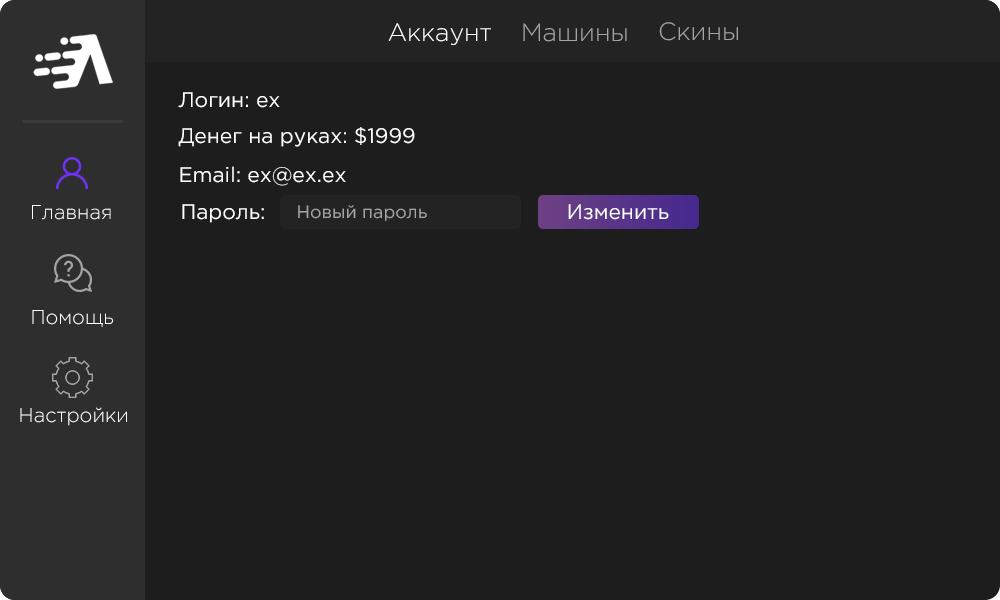
<style>
.page{position:relative;width:1000px;height:600px;background:#1d1d1d}
.page>*{position:absolute;margin:0}
.t1{font:25px "GothamPro-Light";color:#ffffff}
.t2{font:25px "GothamPro-Light";color:#a4a4a4}
.t3{font:21px "GothamPro";color:#ffffff}
.t4{font:20px "GothamPro-Light";color:#ffffff}
.t5{font:17.8px "GothamPro";color:#a4a4a4}
</style>
<div class="page">
<p class="t1" style="left:388px;top:23px;width:103px;height:22px">Аккаунт</p>
<p class="t2" style="left:523px;top:23px;width:104px;height:19px">Машины</p>
<p class="t2" style="left:659px;top:22px;width:79px;height:19px">Скины</p>
<p class="t3" style="left:178px;top:92px;width:102px;height:16px">Логин: ex</p>
<p class="t3" style="left:178px;top:127px;width:237px;height:20px">Денег на руках: $1999</p>
<p class="t3" style="left:180px;top:166px;width:166px;height:20px">Email: ex@ex.ex</p>
<p class="t4" style="left:32px;top:205px;width:79px;height:15px">Главная</p>
<p class="t3" style="left:182px;top:204px;width:82px;height:19px">Пароль:</p>
<p class="t5" style="left:298px;top:205px;width:129px;height:16px">Новый пароль</p>
<p class="t3" style="left:568px;top:204px;width:101px;height:16px">Изменить</p>
<p class="t4" style="left:32px;top:310px;width:81px;height:17px">Помощь</p>
<p class="t4" style="left:20px;top:407px;width:107px;height:19px">Настройки</p>
</div>
